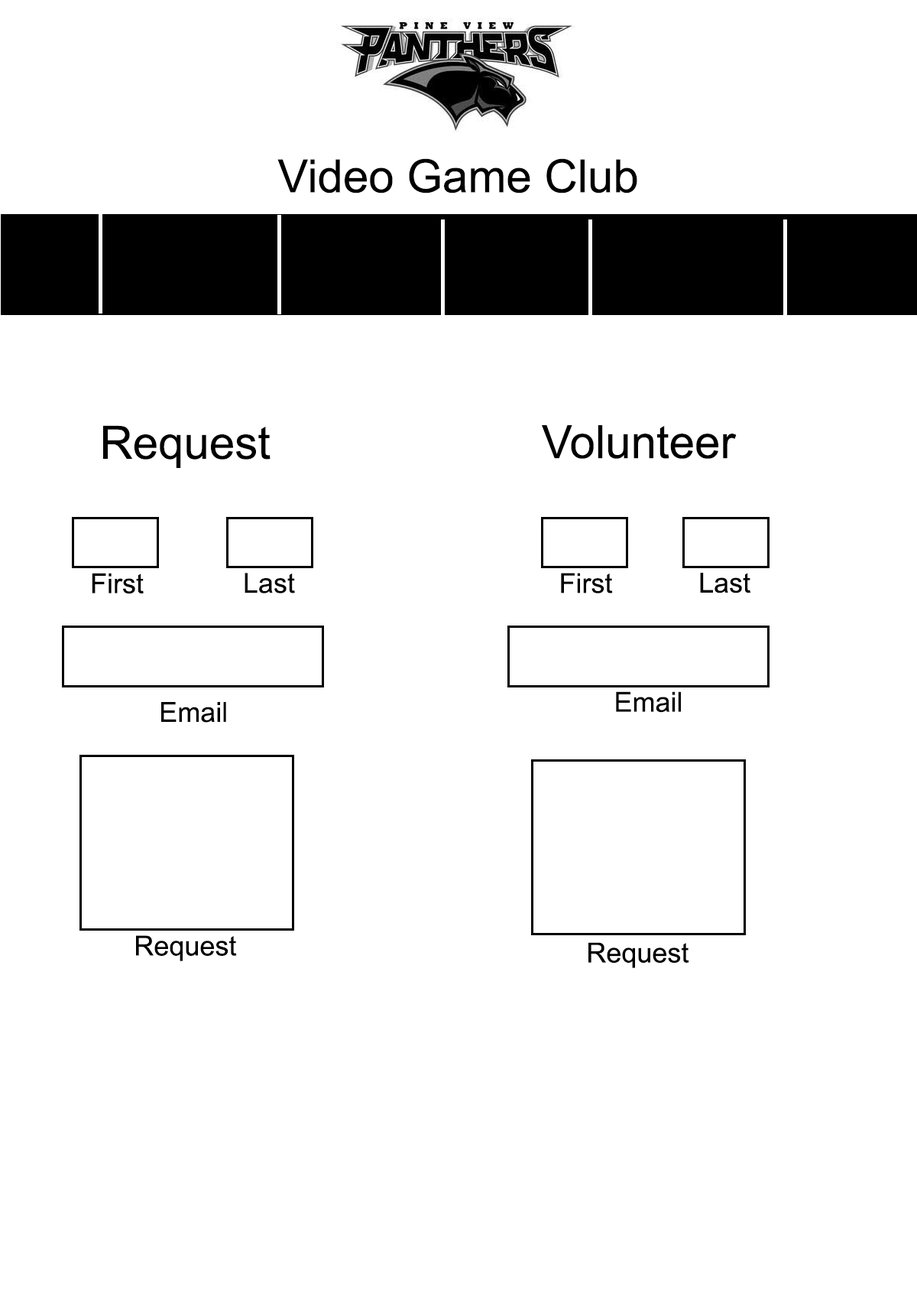
<style>
.page{position:relative;width:917px;height:1300px;background:#ffffff}
.page>*{position:absolute;margin:0}
.t1{font:45.9px "ArialMT";color:#000000}
.t2{font:27.5px "ArialMT";color:#000000}
</style>
<div class="page">
<p class="t1" style="left:278px;top:158px;width:360px;height:35px">Video Game Club</p>
<p class="t1" style="left:103px;top:425px;width:168px;height:43px">Request</p>
<p class="t1" style="left:542px;top:425px;width:195px;height:34px">Volunteer</p>
<p class="t2" style="left:92px;top:573px;width:52px;height:21px">First</p>
<p class="t2" style="left:245px;top:573px;width:50px;height:20px">Last</p>
<p class="t2" style="left:561px;top:573px;width:52px;height:20px">First</p>
<p class="t2" style="left:700px;top:573px;width:51px;height:20px">Last</p>
<p class="t2" style="left:161px;top:702px;width:65px;height:20px">Email</p>
<p class="t2" style="left:616px;top:691px;width:65px;height:22px">Email</p>
<p class="t2" style="left:136px;top:935px;width:101px;height:26px">Request</p>
<p class="t2" style="left:589px;top:942px;width:101px;height:26px">Request</p>
</div>
